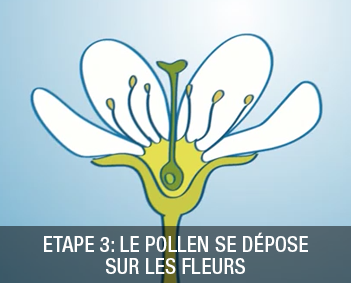
<style>
.page{position:relative;width:351px;height:283px}
.page>*{position:absolute;margin:0}
.t1{font:21.6px/21.6px "HelveticaNeue-MediumCond";color:#ffffff}
</style>
<div class="page">
<p class="t1" style="left:44px;top:232px;width:264px;height:42px;text-align:center">ETAPE 3: LE POLLEN SE DÉPOSE<br>SUR LES FLEURS</p>
</div>
